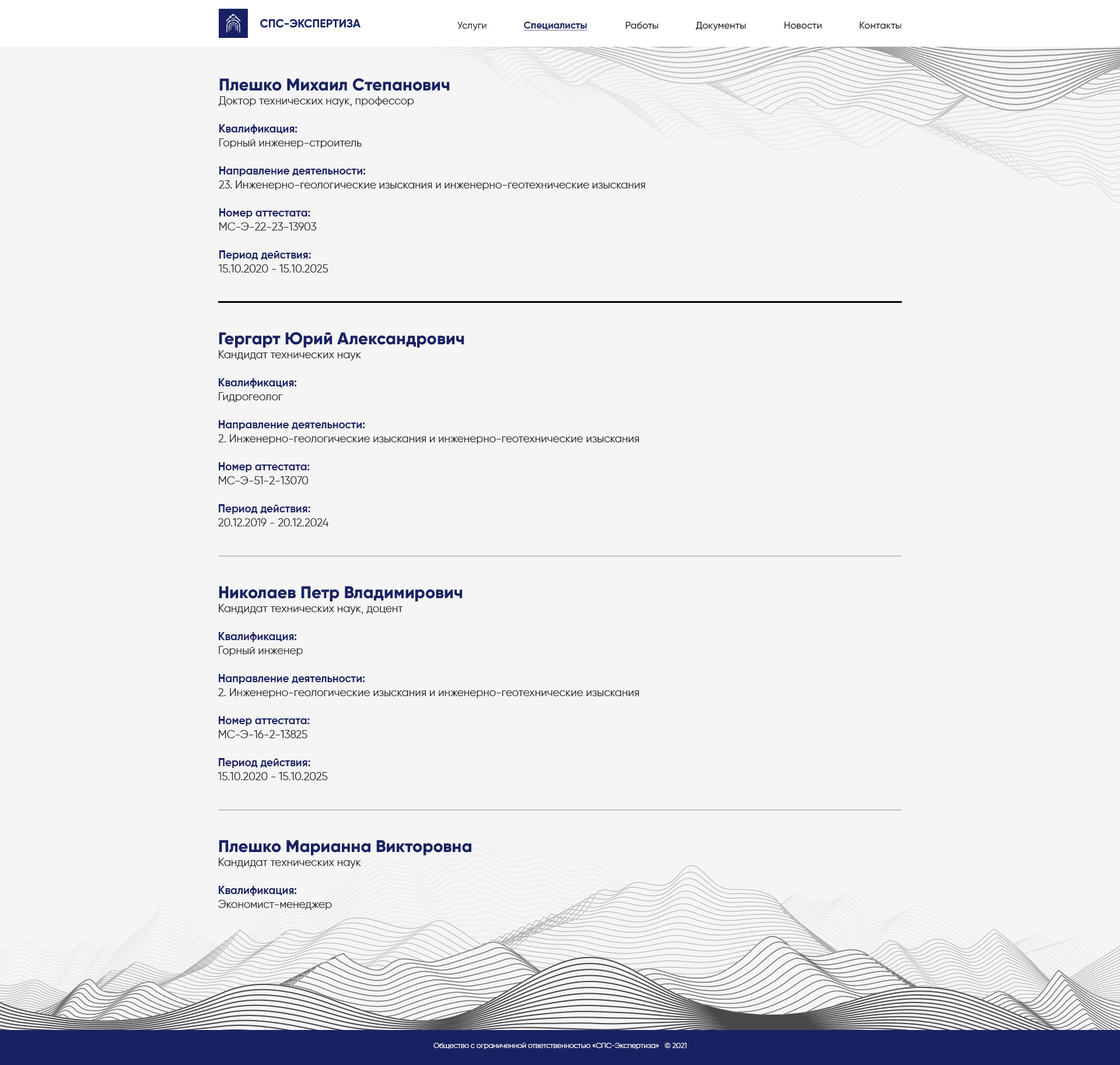
<style>
.page{position:relative;width:1120px;height:1065px;background:#f5f5f5}
.page>*{position:absolute;margin:0}
.t1{font:9.7px "Gilroy-Medium";color:#212121}
.t2{font:9.7px "Gilroy-Bold";color:#182263;text-decoration:underline}
.t3{font:9.7px "Gilroy-Medium";color:#212121;text-transform:uppercase}
.t4{font:10.9px/14px "Gilroy-Regular";color:#212121}
.t5{font:17px/17.5px "Gilroy-ExtraBold";color:#182263}
.t6{font:10.9px/14px "Gilroy-Bold";color:#182263}
.t7{font:17px/16.3px "Gilroy-ExtraBold";color:#182263}
.t8{font:7.3px "Gilroy-Regular";color:#ffffff}
</style>
<div class="page">
<p class="t1" style="left:457px;top:22px;width:30px;height:9px">Услуги</p>
<p class="t2" style="left:523px;top:22px;width:64px;height:9px">Специалисты</p>
<p class="t1" style="left:625px;top:22px;width:34px;height:7px">Работы</p>
<p class="t1" style="left:695px;top:22px;width:51px;height:9px"><span class="t3">д</span>окументы</p>
<p class="t1" style="left:784px;top:22px;width:38px;height:7px"><span class="t3">н</span>овости</p>
<p class="t1" style="left:859px;top:22px;width:42px;height:7px"><span class="t3">к</span>онтакты</p>
<p class="t4" style="left:218px;top:78px;width:427px;height:194px"><span class="t5">Плешко Михаил Степанович<br></span>Доктор технических наук, профессор<br><br><span class="t6">Квалификация: <br></span>Горный инженер-строитель<br><span class="t6"><br>Направление деятельности:<br></span>23. Инженерно-геологические изыскания и инженерно-геотехнические изыскания<br><span class="t6"><br>Номер аттестата: <br></span>МС-Э-22-23-13903<br><span class="t6"><br>Период действия:<br></span>15.10.2020 - 15.10.2025</p>
<p class="t4" style="left:218px;top:332px;width:421px;height:194px"><span class="t7">Гергарт Юрий Александрович<br></span>Кандидат технических наук<br><br><span class="t6">Квалификация: <br></span>Гидрогеолог<br><span class="t6"><br>Направление деятельности:<br></span>2. Инженерно-геологические изыскания и инженерно-геотехнические изыскания<br><span class="t6"><br>Номер аттестата: <br></span>МС-Э-51-2-13070<br><span class="t6"><br>Период действия:<br></span>20.12.2019 - 20.12.2024</p>
<p class="t4" style="left:218px;top:586px;width:421px;height:194px"><span class="t7">Николаев Петр Владимирович<br></span>Кандидат технических наук, доцент<br><br><span class="t6">Квалификация: <br></span>Горный инженер<br><span class="t6"><br>Направление деятельности:<br></span>2. Инженерно-геологические изыскания и инженерно-геотехнические изыскания<br><span class="t6"><br>Номер аттестата: <br></span>МС-Э-16-2-13825<br><span class="t6"><br>Период действия:<br></span>15.10.2020 - 15.10.2025</p>
<p class="t7" style="left:218px;top:839px;width:253px;height:70px">Плешко Марианна Викторовна<br><span class="t4">Кандидат технических наук<br><br></span><span class="t6">Квалификация: <br></span><span class="t4">Экономист-менеджер</span></p>
<p class="t8" style="left:433px;top:1042px;width:254px;height:7px">Общество с ограниченной ответственностью «СПС-Экспертиза»   © 2021</p>
</div>
